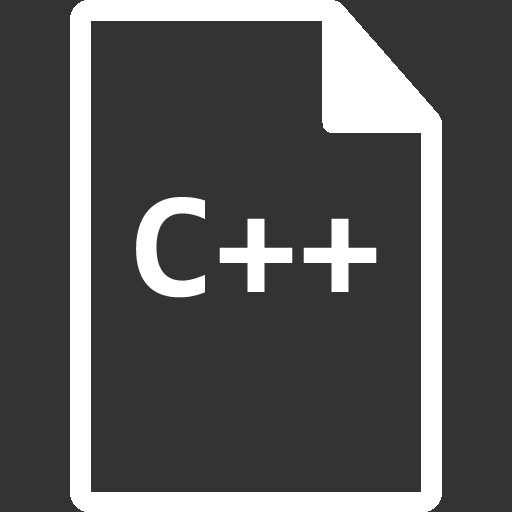
<style>
.page{position:relative;width:512px;height:512px;background:#333333}
.page>*{position:absolute;margin:0}
.t1{font:152.6px "Consolas-Bold";color:#ffffff}
</style>
<div class="page">
<p class="t1" style="left:136px;top:197px;width:241px;height:101px">C++</p>
</div>
